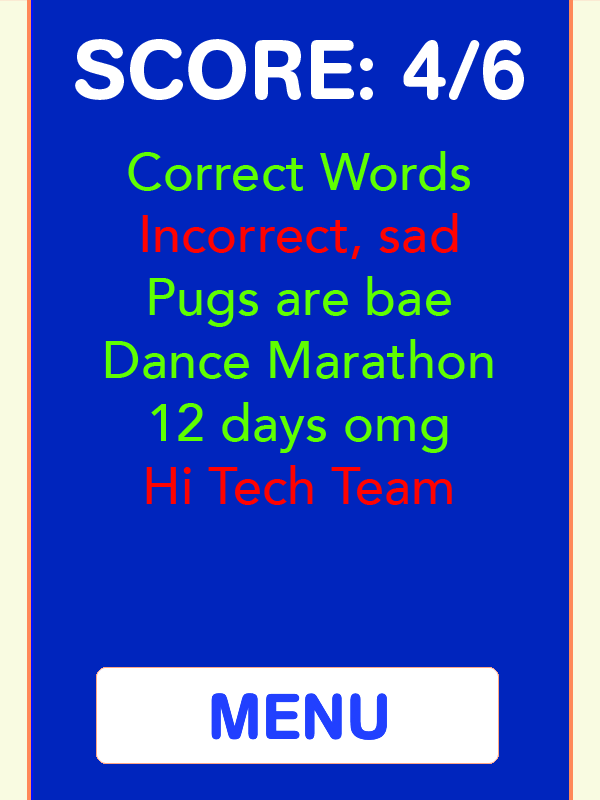
<style>
.page{position:relative;width:600px;height:800px;background:#0025bd}
.page>*{position:absolute;margin:0}
.t1{font:83px "AGBookRounded-Medium";color:#ffffff}
.t2{font:52.3px "AvenirLTStd-Medium";color:#5fff00}
.t3{font:52.3px "AvenirLTStd-Medium";color:#ff0200}
</style>
<div class="page">
<p class="t1" style="left:75px;top:39px;width:449px;height:61px">SCORE: 4/6</p>
<p class="t2" style="left:105px;top:151px;width:388px;height:354px;text-align:center">Correct Words<br><span class="t3">Incorrect, sad<br></span>Pugs are bae<br>Dance Marathon<br>12 days omg<br><span class="t3">Hi Tech Team</span></p>
</div>
